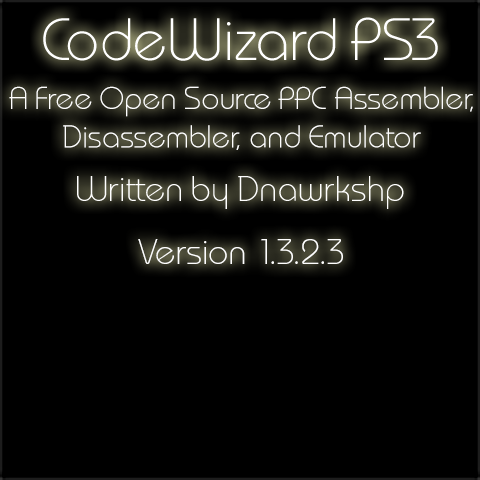
<style>
.page{position:relative;width:480px;height:480px;background:#000000}
.page>*{position:absolute;margin:0}
.t1{font:32px "MonaKo";letter-spacing:0.01em;color:#ffffff}
.t2{font:36px "MonaKo";letter-spacing:0.01em;color:#ffffff}
</style>
<div class="page">
<p class="t1" style="left:9px;top:86px;width:464px;height:64px;text-align:center">A Free Open Source PPC Assembler,<br>Disassembler, and Emulator</p>
<p class="t2" style="left:138px;top:239px;width:205px;height:25px">Version 1.3.2.3</p>
</div>
